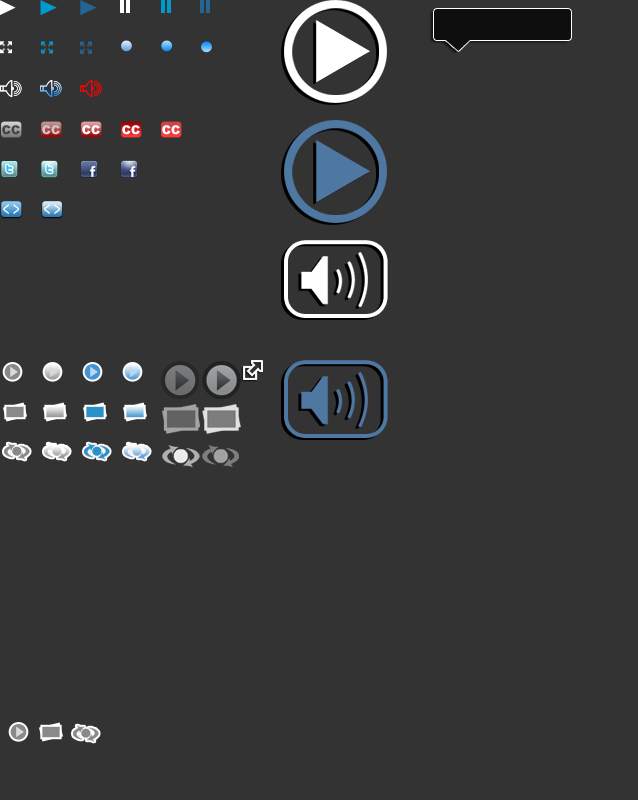
<style>
.page{position:relative;width:638px;height:800px;background:#333333}
.page>*{position:absolute;margin:0}
.t1{font:12px "Arial-Black";color:#454545}
.t2{font:12px "Arial-Black";color:#c9c9c9}
.t3{font:12px "Arial-Black";color:#ffffff}
.t4{font:21.4px "ArialMT";color:#ffffff;scale:0.56 1}
</style>
<div class="page">
<p class="t1" style="left:2px;top:125px;width:18px;height:10px">CC</p>
<p class="t2" style="left:42px;top:125px;width:18px;height:10px">CC</p>
<p class="t3" style="left:82px;top:125px;width:18px;height:10px">CC</p>
<p class="t3" style="left:122px;top:125px;width:18px;height:10px">CC</p>
<p class="t3" style="left:162px;top:125px;width:18px;height:10px">CC</p>
<p class="t4" style="left:3px;top:204px;width:16px;height:11px">&lt; &gt;</p>
<p class="t4" style="left:44px;top:204px;width:16px;height:11px">&lt; &gt;</p>
</div>
